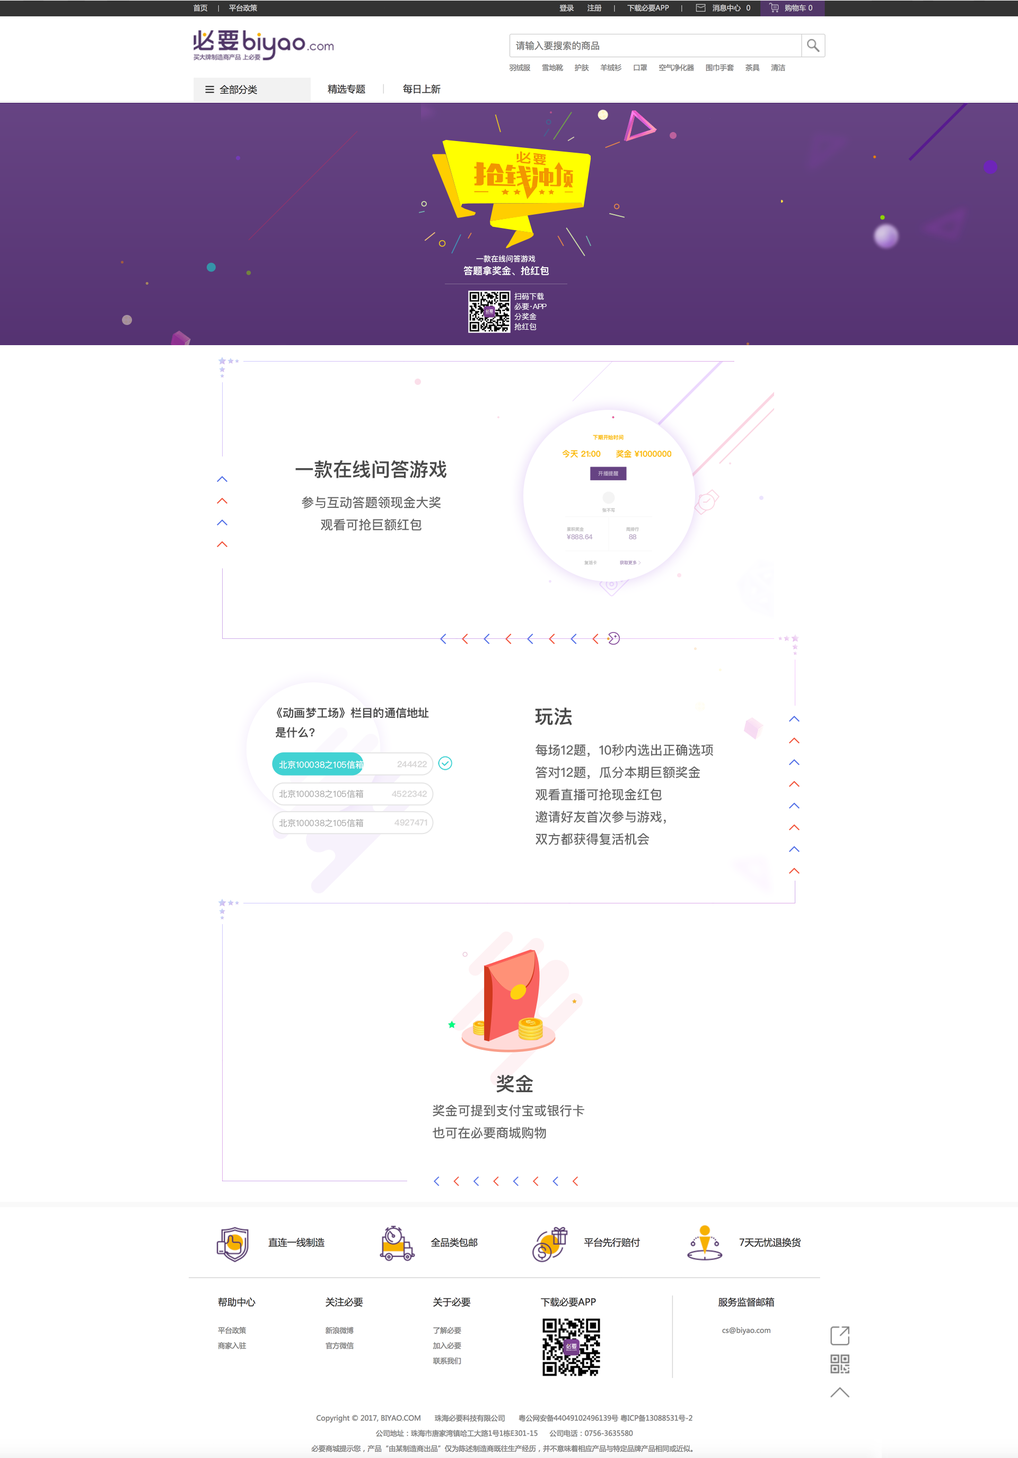
<style>
.page{position:relative;width:1018px;height:1458px;background:#ffffff}
.page>*{position:absolute;margin:0}
.t1{font:7.4px "PingFangSC-Regular";color:#fffffe}
.t2{font:9.5px "PingFangSC-Semibold";color:#ffffff}
.t3{font:7.4px/10.1px "PingFangSC-Light";color:#ffffff}
.t4{font:19.1px "PingFangSC-Semibold";color:#4a4a4a}
.t5{font:12.7px "PingFangSC-Medium";color:#666666}
.t6{font:11.3px "PingFangSC-Semibold";color:#4a4a4a}
.t7{font:8.5px "PingFangSC-Regular";color:#ffffff}
.t8{font:8.5px "PingFangSC-Semibold";color:#d7d6d6}
.t9{font:8.5px "PingFangSC-Regular";color:#aaaaaa}
</style>
<div class="page">
<p class="t1" style="left:476px;top:255px;width:59px;height:7px">一款在线问答游戏</p>
<p class="t2" style="left:463px;top:266px;width:86px;height:10px">答题拿奖金、抢红包</p>
<p class="t3" style="left:514px;top:293px;width:33px;height:37px">扫码下载<br>必要·APP<br>分奖金<br>抢红包</p>
<p class="t4" style="left:295px;top:460px;width:152px;height:18px">一款在线问答游戏</p>
<p class="t5" style="left:302px;top:496px;width:139px;height:35px;text-align:center">参与互动答题领现金大奖<br>观看可抢巨额红包</p>
<p class="t6" style="left:276px;top:707px;width:153px;height:31px">《动画梦工场》栏目的通信地址<br> 是什么？</p>
<p class="t4" style="left:535px;top:707px;width:37px;height:18px">玩法</p>
<p class="t5" style="left:535px;top:744px;width:178px;height:101px">每场12题，10秒内选出正确选项<br>答对12题，瓜分本期巨额奖金<br>观看直播可抢现金红包<br>邀请好友首次参与游戏，<br>双方都获得复活机会</p>
<p class="t7" style="left:279px;top:760px;width:85px;height:9px">北京100038之105信箱</p>
<p class="t8" style="left:397px;top:761px;width:30px;height:7px">244422</p>
<p class="t9" style="left:279px;top:789px;width:85px;height:9px">北京100038之105信箱</p>
<p class="t8" style="left:392px;top:790px;width:35px;height:7px">4522342</p>
<p class="t9" style="left:279px;top:818px;width:85px;height:9px">北京100038之105信箱</p>
<p class="t8" style="left:394px;top:819px;width:33px;height:7px">4927471</p>
<p class="t4" style="left:496px;top:1074px;width:37px;height:19px">奖金</p>
<p class="t5" style="left:433px;top:1104px;width:151px;height:35px">奖金可提到支付宝或银行卡<br>也可在必要商城购物</p>
</div>
